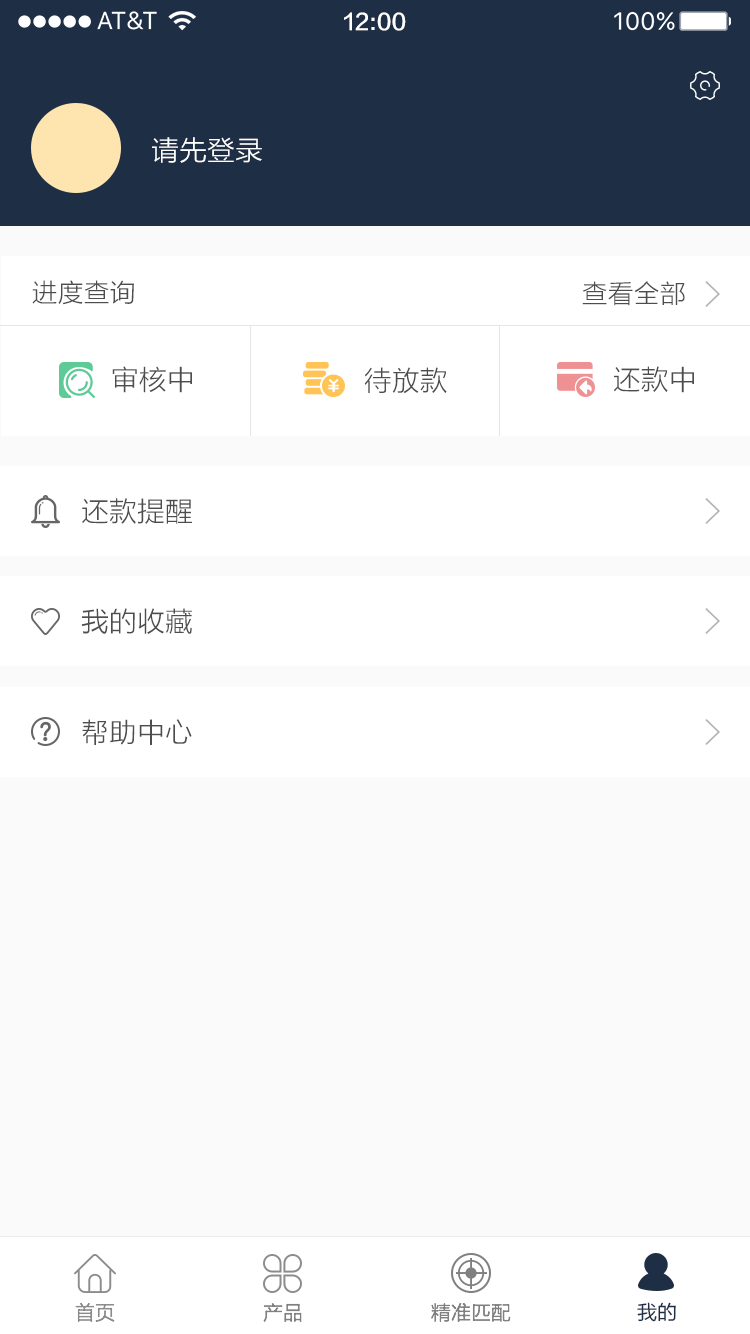
<style>
.page{position:relative;width:750px;height:1334px;background:#ffffff}
.page>*{position:absolute;margin:0}
.t1{font:22px "FZLTZHK--GBK1-0";color:#ffffff}
.t2{font:28px "FZLTXHK";color:#ffffff}
.t3{font:26px "FZLTXHK";color:#4d4d4d}
.t4{font:28px "FZLTXHK";color:#4d4d4d}
.t5{font:20px "FZLTXHK";color:#8c8c8c}
.t6{font:20px "FZLTHK--GBK1-0";color:#1e2e45}
.t7{font:20px "FZLTXHK";color:#808080}
</style>
<div class="page">
<p class="t1" style="left:344px;top:12px;width:62px;height:19px">12:00</p>
<p class="t2" style="left:152px;top:137px;width:110px;height:26px">请先登录</p>
<p class="t3" style="left:32px;top:280px;width:102px;height:25px">进度查询</p>
<p class="t3" style="left:582px;top:281px;width:103px;height:25px">查看全部</p>
<p class="t4" style="left:112px;top:366px;width:80px;height:27px">审核中</p>
<p class="t4" style="left:614px;top:366px;width:80px;height:27px">还款中</p>
<p class="t4" style="left:364px;top:367px;width:83px;height:27px">待放款</p>
<p class="t4" style="left:82px;top:498px;width:110px;height:26px">还款提醒</p>
<p class="t4" style="left:81px;top:608px;width:111px;height:26px">我的收藏</p>
<p class="t4" style="left:82px;top:719px;width:110px;height:26px">帮助中心</p>
<p class="t5" style="left:75px;top:1302px;width:40px;height:20px">首页</p>
<p class="t6" style="left:637px;top:1302px;width:39px;height:20px">我的</p>
<p class="t7" style="left:263px;top:1303px;width:39px;height:19px">产品</p>
<p class="t7" style="left:431px;top:1303px;width:80px;height:19px">精准匹配</p>
</div>
